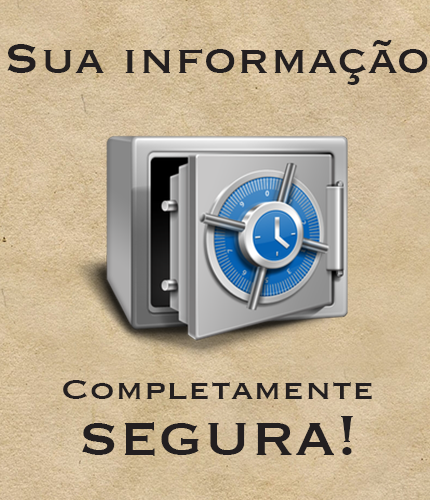
<style>
.page{position:relative;width:430px;height:500px}
.page>*{position:absolute;margin:0}
.t1{font:53.4px "Copperplate";color:#231f20}
.t2{font:36.3px "Copperplate";color:#231f20;scale:1.11 1}
.t3{font:72px "Copperplate";color:#231f20}
</style>
<div class="page">
<p class="t1" style="left:7px;top:40px;width:421px;height:45px">Sua informação</p>
<p class="t2" style="left:63px;top:380px;width:309px;height:19px">Completamente</p>
<p class="t3" style="left:82px;top:416px;width:271px;height:40px">segura!</p>
</div>
